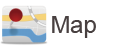
<style>
.page{position:relative;width:140px;height:48px;background:#ffffff}
.page>*{position:absolute;margin:0}
.t1{font:24px "ArialMT";color:#484040}
</style>
<div class="page">
<p class="t1" style="left:52px;top:16px;width:44px;height:22px">Map</p>
</div>
